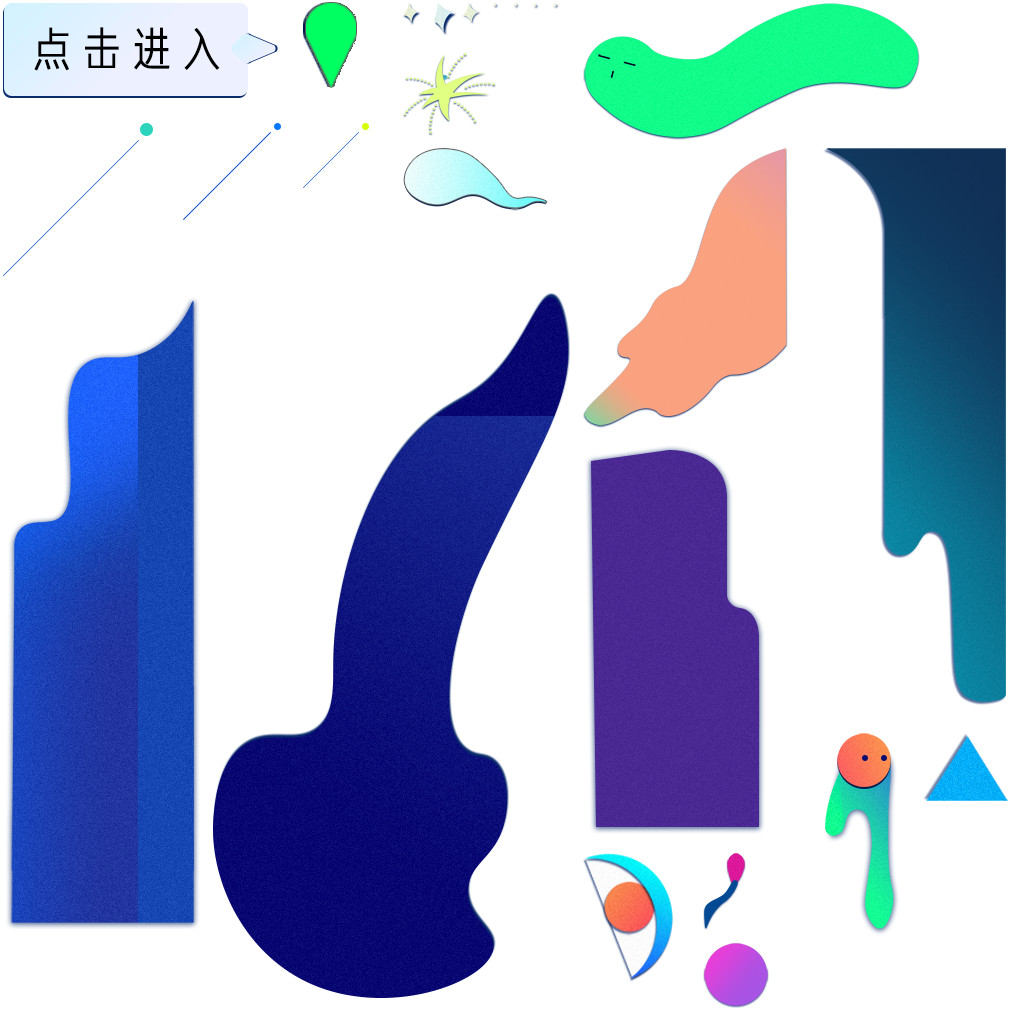
<style>
.page{position:relative;width:1024px;height:1024px;background:#ffffff}
.page>*{position:absolute;margin:0}
.t1{font:47.1px "FZJHJW--GB1-0";letter-spacing:0.04em;color:#000000;font-weight:bold}
</style>
<div class="page">
<p class="t1" style="left:34px;top:27px;width:186px;height:44px">点击进入</p>
</div>
